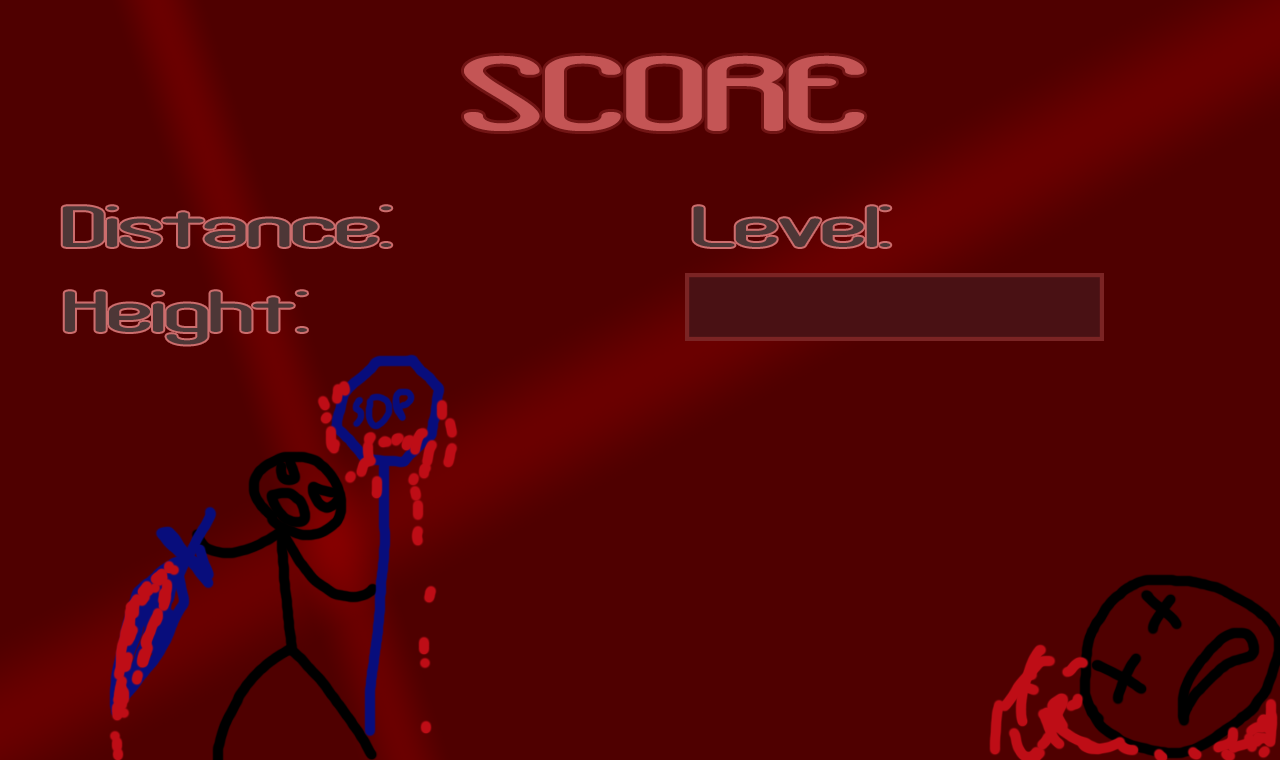
<style>
.page{position:relative;width:1280px;height:760px;background:#4f0000}
.page>*{position:absolute;margin:0}
.t1{font:115px "CrackdownR2BRK";color:#c45555}
.t2{font:62.5px "CrackdownR2BRK";color:#4d3737}
</style>
<div class="page">
<p class="t1" style="left:464px;top:55px;width:401px;height:76px">SCORE</p>
<p class="t2" style="left:62px;top:206px;width:330px;height:41px">:Distance</p>
<p class="t2" style="left:693px;top:206px;width:198px;height:41px">:Level</p>
<p class="t2" style="left:64px;top:291px;width:243px;height:54px">:Height</p>
</div>
